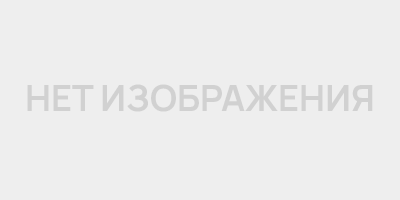
<style>
.page{position:relative;width:400px;height:200px;background:#eeeeee}
.page>*{position:absolute;margin:0}
.t1{font:36px "Manrope-Bold";color:#d1d1d1}
</style>
<div class="page">
<p class="t1" style="left:27px;top:84px;width:346px;height:28px">НЕТ ИЗОБРАЖЕНИЯ</p>
</div>
